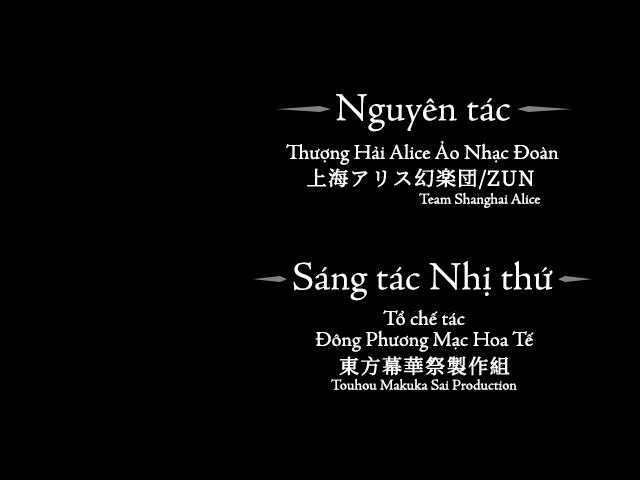
<style>
.page{position:relative;width:640px;height:480px;background:#000000}
.page>*{position:absolute;margin:0}
.t1{font:40px "SVN-AdobeJenson";color:#ffffff}
.t2{font:21px "SVN-AdobeJenson";color:#ffffff}
.t3{font:15px "SVN-AdobeJenson";color:#ffffff}
.t4{font:21px/21px "SVN-AdobeJenson";color:#ffffff}
</style>
<div class="page">
<p class="t1" style="left:336px;top:94px;width:174px;height:38px">Nguyên tác</p>
<p class="t2" style="left:286px;top:141px;width:273px;height:24px">Thượng Hải Alice Ảo Nhạc Đoàn</p>
<p class="t3" style="left:419px;top:192px;width:122px;height:16px">Team Shanghai Alice</p>
<p class="t1" style="left:293px;top:261px;width:260px;height:40px">Sáng tác Nhị thứ</p>
<p class="t4" style="left:315px;top:309px;width:219px;height:43px;text-align:center">Tổ chế tác<br>Đông Phương Mạc Hoa Tế</p>
<p class="t3" style="left:331px;top:378px;width:186px;height:12px">Touhou Makuka Sai Production</p>
</div>
